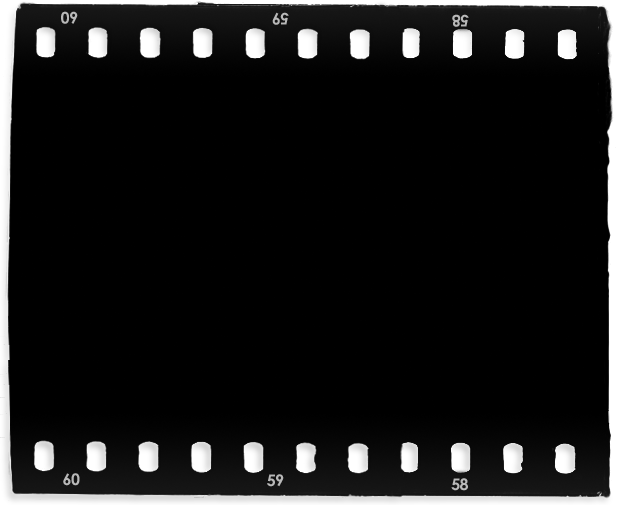
<style>
.page{position:relative;width:620px;height:505px;background:#000000}
.page>*{position:absolute;margin:0}
.t1{font:16px "CenturyGothic-Bold";letter-spacing:-0.04em;color:#b9b9b9}
.t2{font:16px "CenturyGothic-Bold";letter-spacing:-0.04em;color:#b8b8b8}
</style>
<div class="page">
<p class="t1" style="left:61px;top:11px;width:17px;height:13px;rotate:180deg">60</p>
<p class="t1" style="left:272px;top:12px;width:17px;height:13px;rotate:180deg">59</p>
<p class="t1" style="left:452px;top:14px;width:17px;height:13px;rotate:180deg">58</p>
<p class="t1" style="left:63px;top:473px;width:17px;height:13px">60</p>
<p class="t2" style="left:267px;top:474px;width:17px;height:13px">59</p>
<p class="t1" style="left:451px;top:478px;width:17px;height:13px">58</p>
</div>
